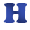
<style>
.page{position:relative;width:30px;height:30px;background:#ffffff}
.page>*{position:absolute;margin:0}
.t1{font:30px "CooperBlack";color:#30479f}
</style>
<div class="page">
<p class="t1" style="left:3px;top:3px;width:24px;height:20px">H</p>
</div>
